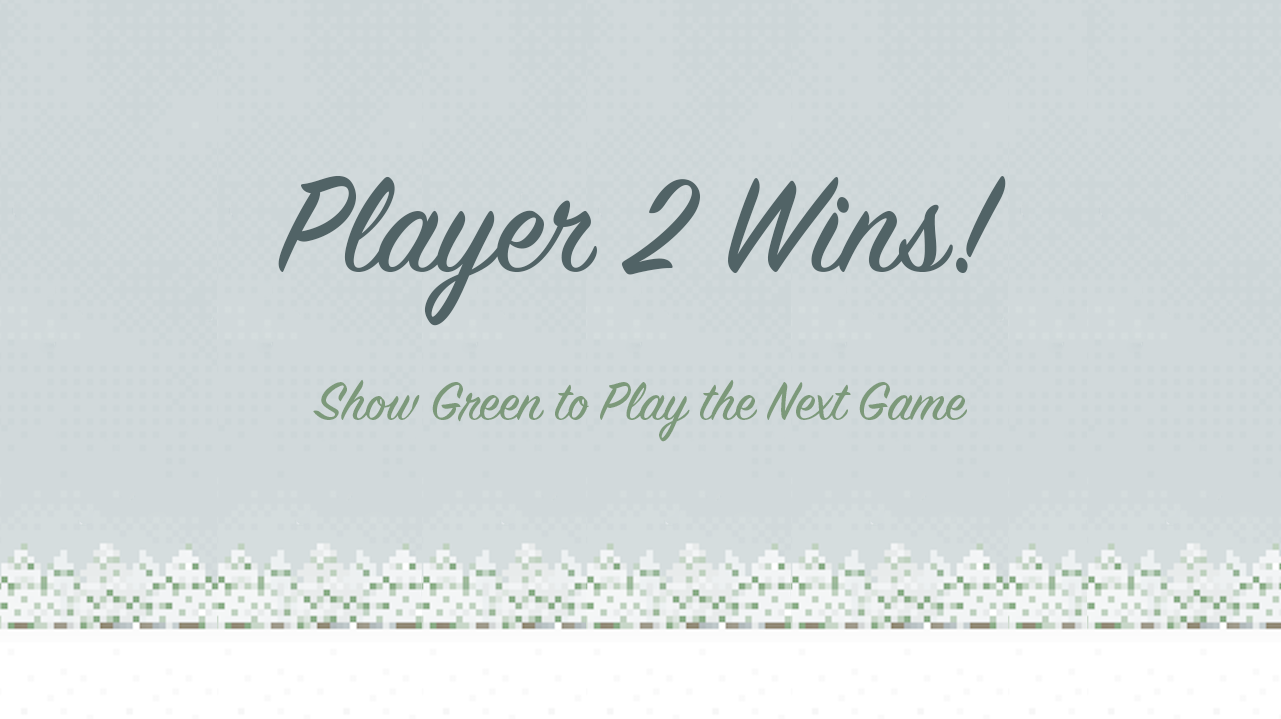
<style>
.page{position:relative;width:1281px;height:719px;background:#d1d9db}
.page>*{position:absolute;margin:0}
.t1{font:150px "SignPainter-HouseScript";color:#516366}
.t2{font:60px "SignPainter-HouseScript";color:#7c997a}
</style>
<div class="page">
<p class="t1" style="left:278px;top:175px;width:728px;height:151px">Player 2 Wins!</p>
<p class="t2" style="left:313px;top:379px;width:654px;height:63px">Show Green to Play the Next Game</p>
</div>
